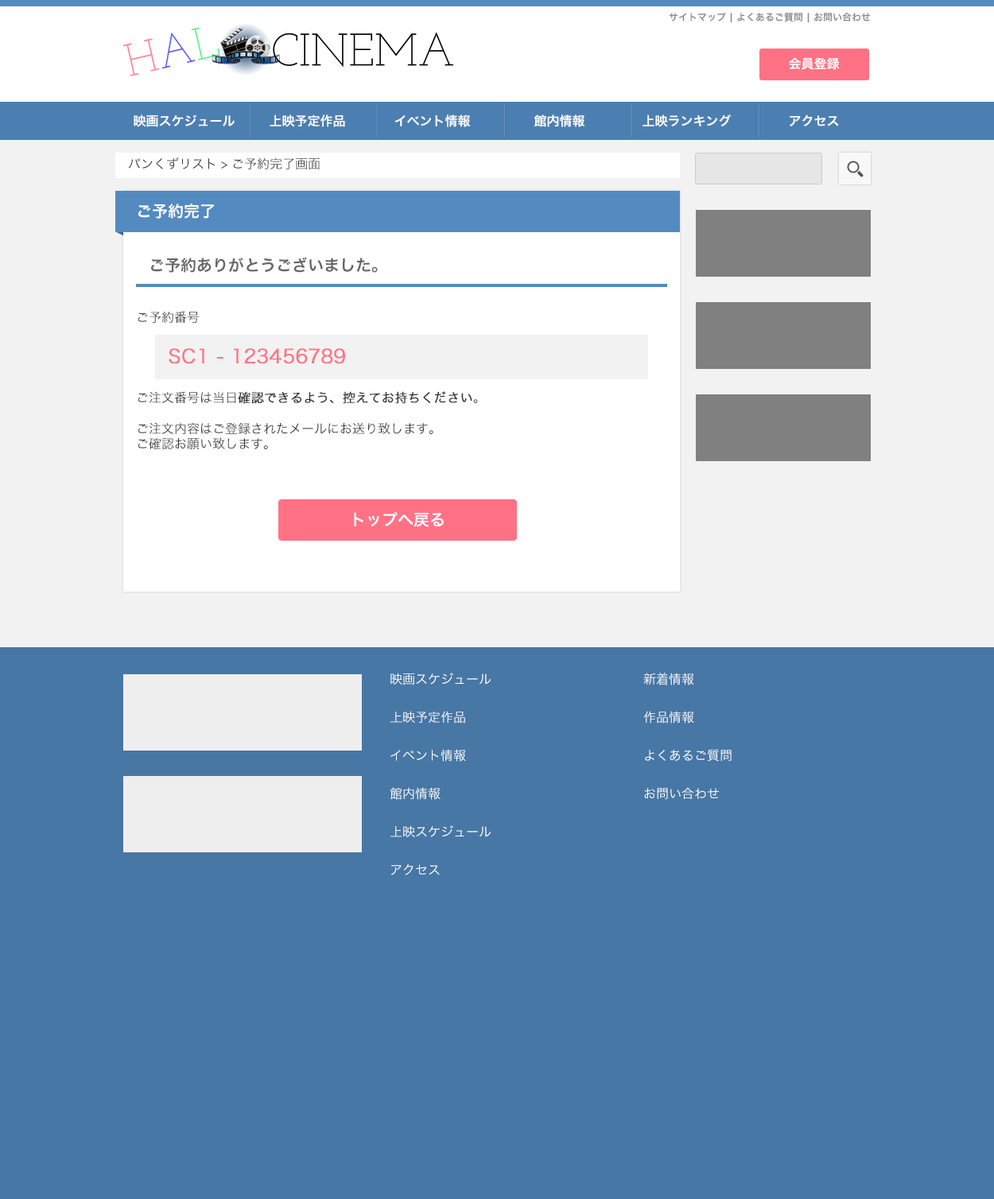
<style>
.page{position:relative;width:994px;height:1199px;background:#4777a5}
.page>*{position:absolute;margin:0}
.t1{font:9.5px "HiraKakuProN-W6";color:#888888}
.t2{font:12.7px "HiraKakuProN-W6";color:#ffffff}
.t3{font:12.7px "HiraKakuProN-W3";color:#333333}
.t4{font:15.9px "HiraKakuProN-W6";color:#ffffff}
.t5{font:15.9px "HiraKakuProN-W6";color:#666666}
.t6{font:19.1px "HiraKakuProN-W3";color:#ff7285;font-weight:bold}
.t7{font:12.7px "HiraKakuProN-W3";color:#333333;font-weight:bold}
.t8{font:12.7px/19.1px "HiraKakuProN-W3";color:#ffffff}
</style>
<div class="page">
<p class="t1" style="left:669px;top:12px;width:202px;height:11px">サイトマップ | よくあるご質問 | お問い合わせ</p>
<p class="t2" style="left:789px;top:57px;width:51px;height:13px">会員登録</p>
<p class="t2" style="left:134px;top:115px;width:101px;height:12px">映画スケジュール</p>
<p class="t2" style="left:270px;top:115px;width:75px;height:12px">上映予定作品</p>
<p class="t2" style="left:394px;top:115px;width:77px;height:12px">イベント情報</p>
<p class="t2" style="left:534px;top:115px;width:51px;height:12px">館内情報</p>
<p class="t2" style="left:643px;top:115px;width:89px;height:12px">上映ランキング</p>
<p class="t2" style="left:790px;top:115px;width:49px;height:11px">アクセス</p>
<p class="t3" style="left:128px;top:157px;width:192px;height:13px">パンくずリスト &gt; ご予約完了画面</p>
<p class="t4" style="left:138px;top:204px;width:77px;height:15px">ご予約完了</p>
<p class="t5" style="left:151px;top:257px;width:227px;height:16px">ご予約ありがとうございました。</p>
<p class="t3" style="left:138px;top:311px;width:62px;height:12px">ご予約番号</p>
<p class="t6" style="left:169px;top:348px;width:176px;height:16px">SC1 - 123456789</p>
<p class="t3" style="left:138px;top:391px;width:340px;height:59px;text-align:justify">ご注文番号は当日<span class="t7">確認できるよう、控えてお持ちください</span>。<br><br>ご注文内容はご登録されたメールにお送り致します。<br>ご確認お願い致します。</p>
<p class="t4" style="left:354px;top:512px;width:90px;height:15px">トップへ戻る</p>
<p class="t8" style="left:390px;top:673px;width:102px;height:203px">映画スケジュール<br><br>上映予定作品<br><br>イベント情報<br><br>館内情報<br><br>上映スケジュール<br><br>アクセス</p>
<p class="t8" style="left:643px;top:673px;width:89px;height:126px">新着情報<br><br>作品情報<br><br>よくあるご質問<br><br>お問い合わせ</p>
</div>
